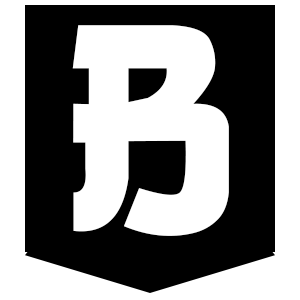
<style>
.page{position:relative;width:300px;height:300px;background:#ffffff}
.page>*{position:absolute;margin:0}
.t1{font:309.9px "GangofThree";color:#ffffff}
</style>
<div class="page">
<p class="t1" style="left:72px;top:25px;width:157px;height:211px">B</p>
</div>
